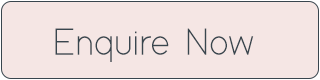
<style>
.page{position:relative;width:320px;height:80px;background:#f5e6e4}
.page>*{position:absolute;margin:0}
.t1{font:38.5px "ModernSansLight";letter-spacing:-0.02em;color:#39464e;scale:0.96 1}
</style>
<div class="page">
<p class="t1" style="left:55px;top:28px;width:199px;height:34px">Enquire Now</p>
</div>
